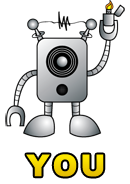
<style>
.page{position:relative;width:130px;height:184px;background:#ffffff}
.page>*{position:absolute;margin:0}
.t1{font:29.8px "Arial-Black";letter-spacing:0.1em;color:#f3d601}
</style>
<div class="page">
<p class="t1" style="left:26px;top:154px;width:78px;height:23px">YOU</p>
</div>
